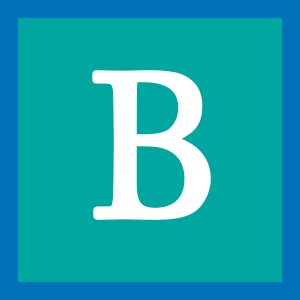
<style>
.page{position:relative;width:300px;height:300px;background:#00a6a0}
.page>*{position:absolute;margin:0}
.t1{font:200px "ACaslonPro-Regular";color:#ffffff;font-weight:bold}
</style>
<div class="page">
<p class="t1" style="left:92px;top:70px;width:119px;height:150px">B</p>
</div>
